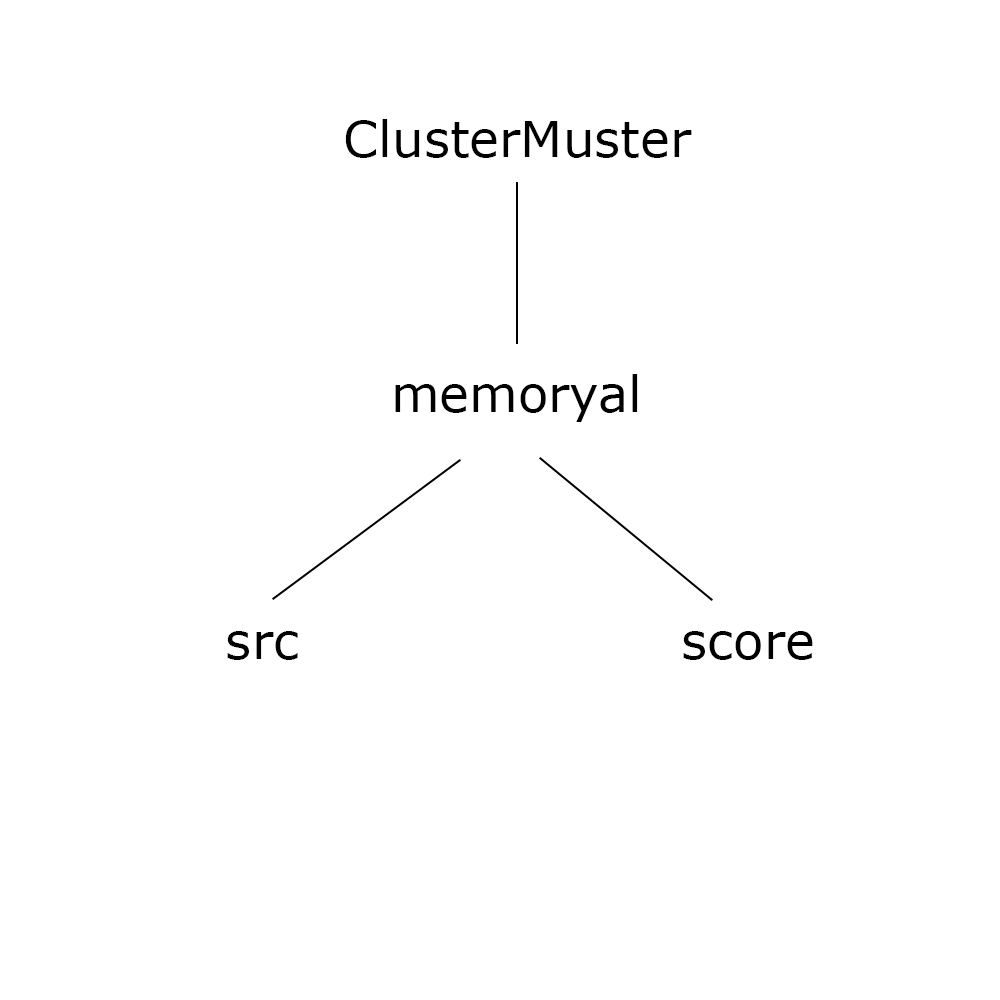
<style>
.page{position:relative;width:1000px;height:1000px;background:#ffffff}
.page>*{position:absolute;margin:0}
.t1{font:50px "Verdana";color:#000000}
</style>
<div class="page">
<p class="t1" style="left:345px;top:119px;width:347px;height:39px">ClusterMuster</p>
<p class="t1" style="left:395px;top:374px;width:243px;height:48px">memoryal</p>
<p class="t1" style="left:227px;top:631px;width:71px;height:29px">src</p>
<p class="t1" style="left:683px;top:631px;width:130px;height:29px">score</p>
</div>
